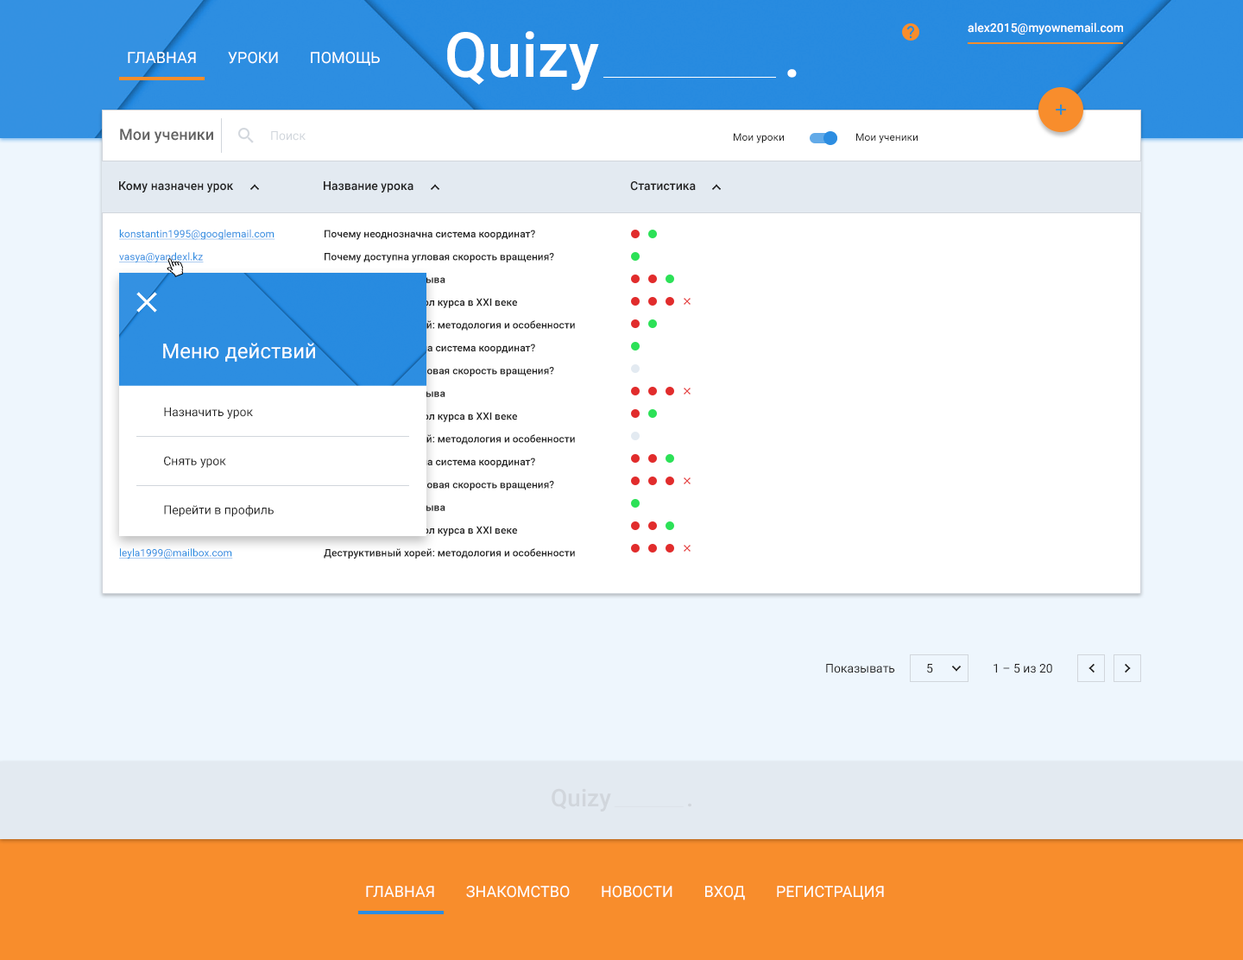
<style>
.page{position:relative;width:1243px;height:960px;background:#ffffff}
.page>*{position:absolute;margin:0}
.t1{font:12.1px "Roboto-Medium";color:#ffffff}
.t2{font:62.1px "Roboto-Medium";color:#ffffff}
.t3{font:15.5px "Roboto-Regular";color:#ffffff;text-transform:uppercase}
.t4{font:15.5px "Roboto-Medium";color:#636363}
.t5{font:12.1px "Roboto-Regular";color:#d1d6dc}
.t6{font:10.4px "Roboto-Regular";color:#212121}
.t7{font:12.1px "Roboto-Medium";color:#212121}
.t8{font:10.4px "Roboto-Medium"}
.t9{font:20.7px "Roboto-Regular";color:#ffffff}
.t10{font:12.1px "Roboto-Regular";color:#212121}
.t11{font:24.2px "Roboto-Medium";color:#d1d6dc}
</style>
<div class="page">
<p class="t1" style="left:967px;top:22px;width:156px;height:13px">alex2015@myownemail.com</p>
<p class="t2" style="left:447px;top:31px;width:152px;height:60px">Quizy</p>
<p class="t3" style="left:128px;top:52px;width:252px;height:14px">Главная        Уроки        Помощь</p>
<p class="t2" style="left:787px;top:69px;width:9px;height:9px">.</p>
<p class="t4" style="left:120px;top:129px;width:93px;height:14px">Мои ученики</p>
<p class="t5" style="left:271px;top:131px;width:34px;height:10px">Поиск</p>
<p class="t6" style="left:734px;top:133px;width:50px;height:10px">Мои уроки</p>
<p class="t6" style="left:856px;top:133px;width:61px;height:10px">Мои ученики</p>
<p class="t7" style="left:119px;top:181px;width:115px;height:11px">Кому назначен урок</p>
<p class="t7" style="left:324px;top:181px;width:89px;height:11px">Название урока</p>
<p class="t7" style="left:630px;top:181px;width:66px;height:10px">Статистика</p>
<p class="t8" style="left:324px;top:230px;width:251px;height:328px">Почему неоднозначна система координат?<br>Почему доступна угловая скорость вращения?<br>Ложе как трубка взрыва<br>Прецессирующий угол курса в XXI веке<br>Деструктивный хорей: методология и особенности<br>Почему неоднозначна система координат?<br>Почему доступна угловая скорость вращения?<br>Ложе как трубка взрыва<br>Прецессирующий угол курса в XXI веке<br>Деструктивный хорей: методология и особенности<br>Почему неоднозначна система координат?<br>Почему доступна угловая скорость вращения?<br>Ложе как трубка взрыва<br>Прецессирующий угол курса в XXI веке<br>Деструктивный хорей: методология и особенности</p>
<p class="t9" style="left:163px;top:343px;width:152px;height:19px">Меню действий</p>
<p class="t10" style="left:164px;top:407px;width:110px;height:110px">Назначить урок<br>Снять урок<br>Перейти в профиль</p>
<p class="t10" style="left:826px;top:664px;width:69px;height:9px">Показывать</p>
<p class="t10" style="left:927px;top:664px;width:6px;height:9px">5</p>
<p class="t10" style="left:993px;top:664px;width:59px;height:9px">1 – 5 из 20</p>
<p class="t11" style="left:551px;top:788px;width:60px;height:23px">Quizy</p>
<p class="t11" style="left:688px;top:803px;width:3px;height:4px">.</p>
<p class="t3" style="left:366px;top:885px;width:518px;height:15px">Главная        Знакомство        Новости        Вход        Регистрация</p>
</div>
